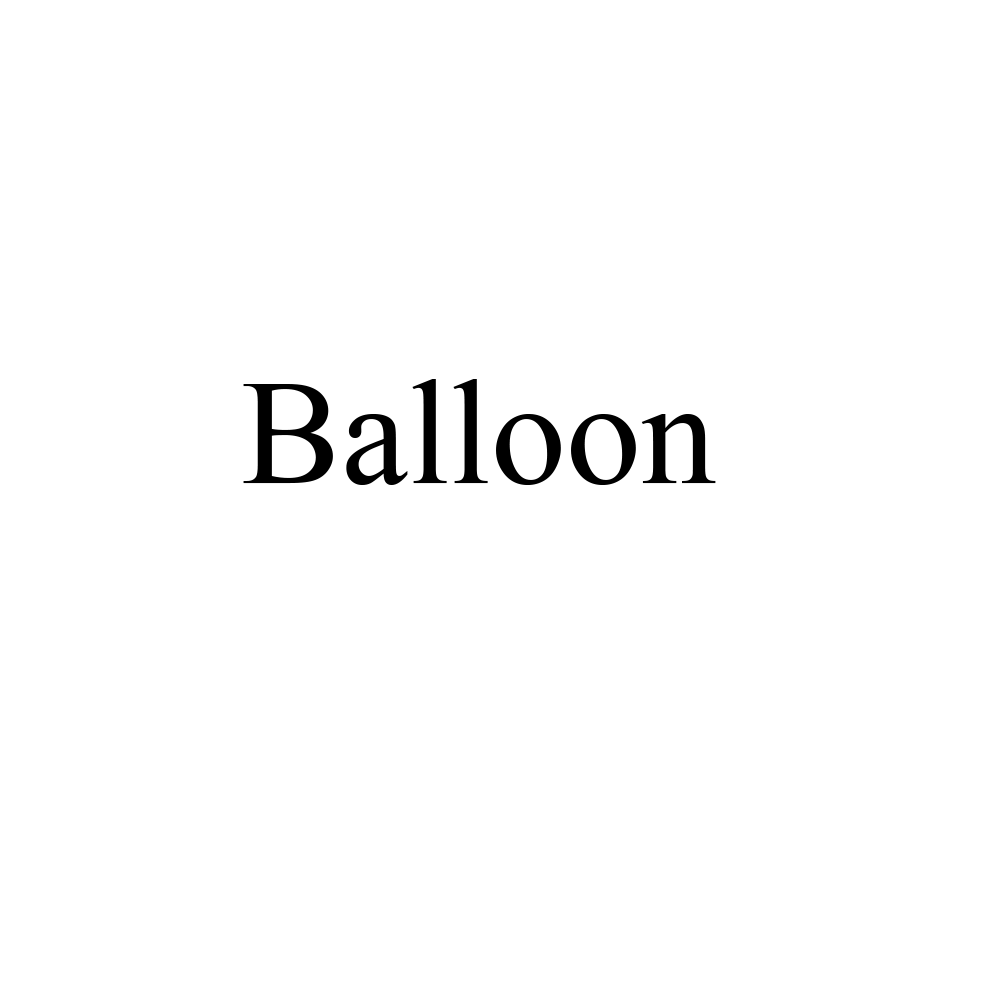
<style>
.page{position:relative;width:1000px;height:1000px;background:#ffffff}
.page>*{position:absolute;margin:0}
.t1{font:150px "TimesNewRomanPSMT";color:#000000}
</style>
<div class="page">
<p class="t1" style="left:243px;top:379px;width:473px;height:106px">Balloon</p>
</div>
